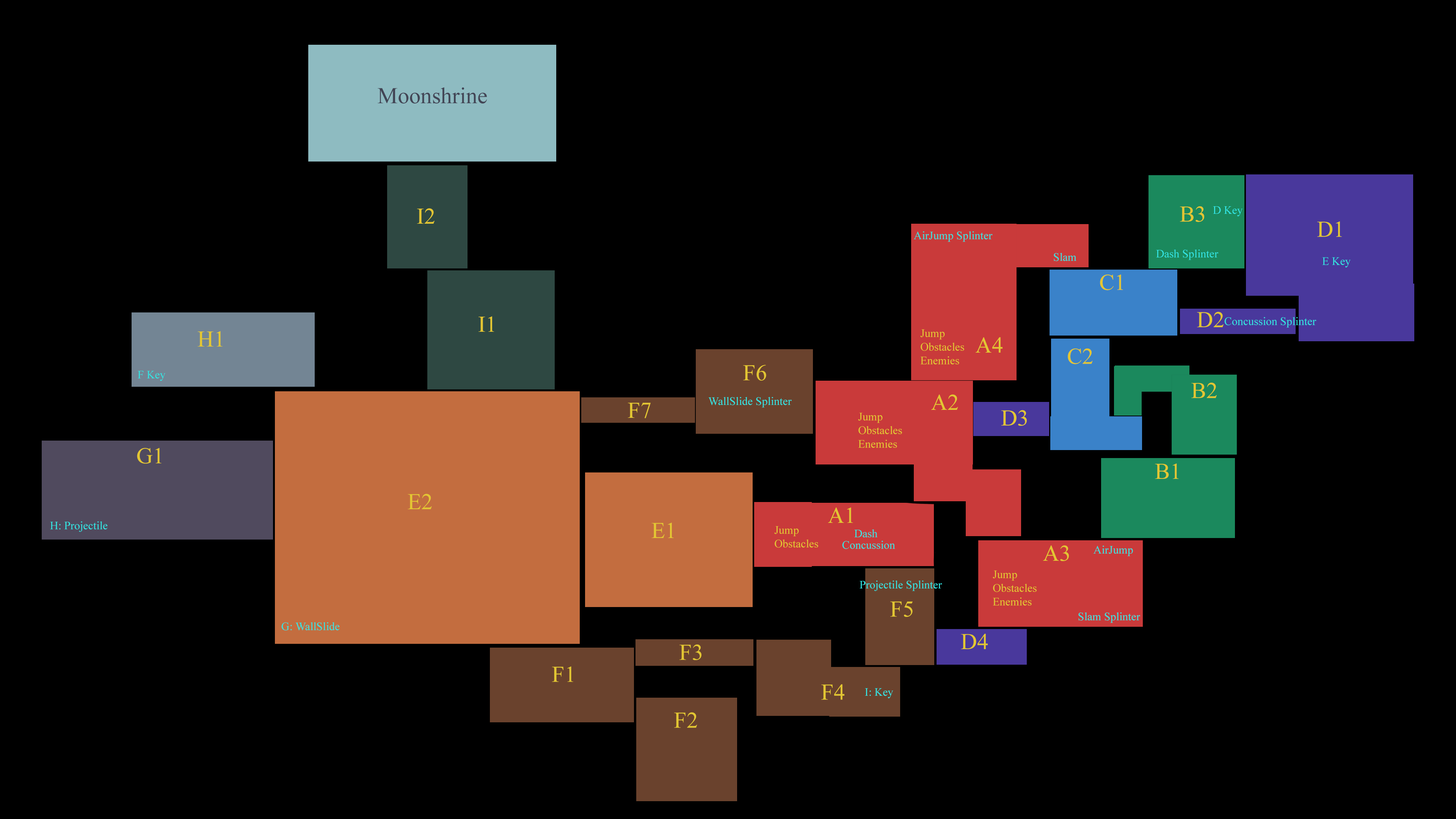
<style>
.page{position:relative;width:1456px;height:819px;background:#000000}
.page>*{position:absolute;margin:0}
.t1{font:22.7px "TimesNewRomanPSMT";color:#424555}
.t2{font:22.7px "TimesNewRomanPSMT";color:#e3c633}
.t3{font:11.4px "TimesNewRomanPSMT";color:#33e3e1}
.t4{font:11.4px "TimesNewRomanPSMT";color:#e3c633}
</style>
<div class="page">
<p class="t1" style="left:378px;top:87px;width:109px;height:17px">Moonshrine</p>
<p class="t2" style="left:417px;top:208px;width:18px;height:16px">I2</p>
<p class="t2" style="left:1180px;top:206px;width:24px;height:16px">B3</p>
<p class="t3" style="left:1213px;top:206px;width:30px;height:11px">D Key</p>
<p class="t2" style="left:1317px;top:221px;width:25px;height:16px">D1</p>
<p class="t3" style="left:913px;top:231px;width:80px;height:11px">AirJump Splinter</p>
<p class="t3" style="left:1054px;top:253px;width:22px;height:8px">Slam</p>
<p class="t3" style="left:1156px;top:249px;width:62px;height:11px">Dash Splinter</p>
<p class="t3" style="left:1322px;top:257px;width:29px;height:11px">E Key</p>
<p class="t2" style="left:1100px;top:275px;width:23px;height:15px">C1</p>
<p class="t2" style="left:479px;top:316px;width:15px;height:16px">I1</p>
<p class="t2" style="left:1197px;top:312px;width:27px;height:15px">D2</p>
<p class="t3" style="left:1224px;top:317px;width:92px;height:11px">Concussion Splinter</p>
<p class="t4" style="left:920px;top:329px;width:44px;height:35px">Jump<br>Obstacles<br>Enemies</p>
<p class="t2" style="left:198px;top:331px;width:25px;height:16px">H1</p>
<p class="t2" style="left:976px;top:337px;width:27px;height:16px">A4</p>
<p class="t2" style="left:1068px;top:348px;width:25px;height:16px">C2</p>
<p class="t2" style="left:743px;top:365px;width:23px;height:16px">F6</p>
<p class="t3" style="left:138px;top:371px;width:27px;height:10px">F Key</p>
<p class="t2" style="left:1191px;top:383px;width:26px;height:15px">B2</p>
<p class="t3" style="left:708px;top:397px;width:84px;height:11px">WallSlide Splinter</p>
<p class="t2" style="left:931px;top:394px;width:27px;height:16px">A2</p>
<p class="t2" style="left:628px;top:403px;width:23px;height:15px">F7</p>
<p class="t4" style="left:858px;top:413px;width:44px;height:35px">Jump<br>Obstacles<br>Enemies</p>
<p class="t2" style="left:1001px;top:410px;width:26px;height:16px">D3</p>
<p class="t2" style="left:137px;top:448px;width:25px;height:16px">G1</p>
<p class="t2" style="left:1155px;top:463px;width:24px;height:16px">B1</p>
<p class="t2" style="left:408px;top:494px;width:24px;height:15px">E2</p>
<p class="t2" style="left:828px;top:507px;width:25px;height:16px">A1</p>
<p class="t3" style="left:50px;top:521px;width:58px;height:11px">H: Projectile</p>
<p class="t2" style="left:651px;top:522px;width:23px;height:16px">E1</p>
<p class="t4" style="left:774px;top:526px;width:44px;height:22px">Jump<br>Obstacles</p>
<p class="t3" style="left:854px;top:529px;width:24px;height:9px">Dash</p>
<p class="t3" style="left:842px;top:541px;width:53px;height:8px">Concussion</p>
<p class="t2" style="left:1043px;top:545px;width:26px;height:16px">A3</p>
<p class="t3" style="left:1093px;top:546px;width:40px;height:10px">AirJump</p>
<p class="t3" style="left:860px;top:580px;width:82px;height:11px">Projectile Splinter</p>
<p class="t4" style="left:993px;top:570px;width:44px;height:36px">Jump<br>Obstacles<br>Enemies</p>
<p class="t2" style="left:890px;top:601px;width:23px;height:16px">F5</p>
<p class="t3" style="left:1078px;top:612px;width:62px;height:11px">Slam Splinter</p>
<p class="t3" style="left:281px;top:622px;width:59px;height:9px">G: WallSlide</p>
<p class="t2" style="left:679px;top:644px;width:22px;height:16px">F3</p>
<p class="t2" style="left:552px;top:666px;width:21px;height:16px">F1</p>
<p class="t2" style="left:821px;top:684px;width:23px;height:16px">F4</p>
<p class="t3" style="left:865px;top:688px;width:28px;height:10px">I: Key</p>
<p class="t2" style="left:674px;top:712px;width:23px;height:16px">F2</p>
</div>
